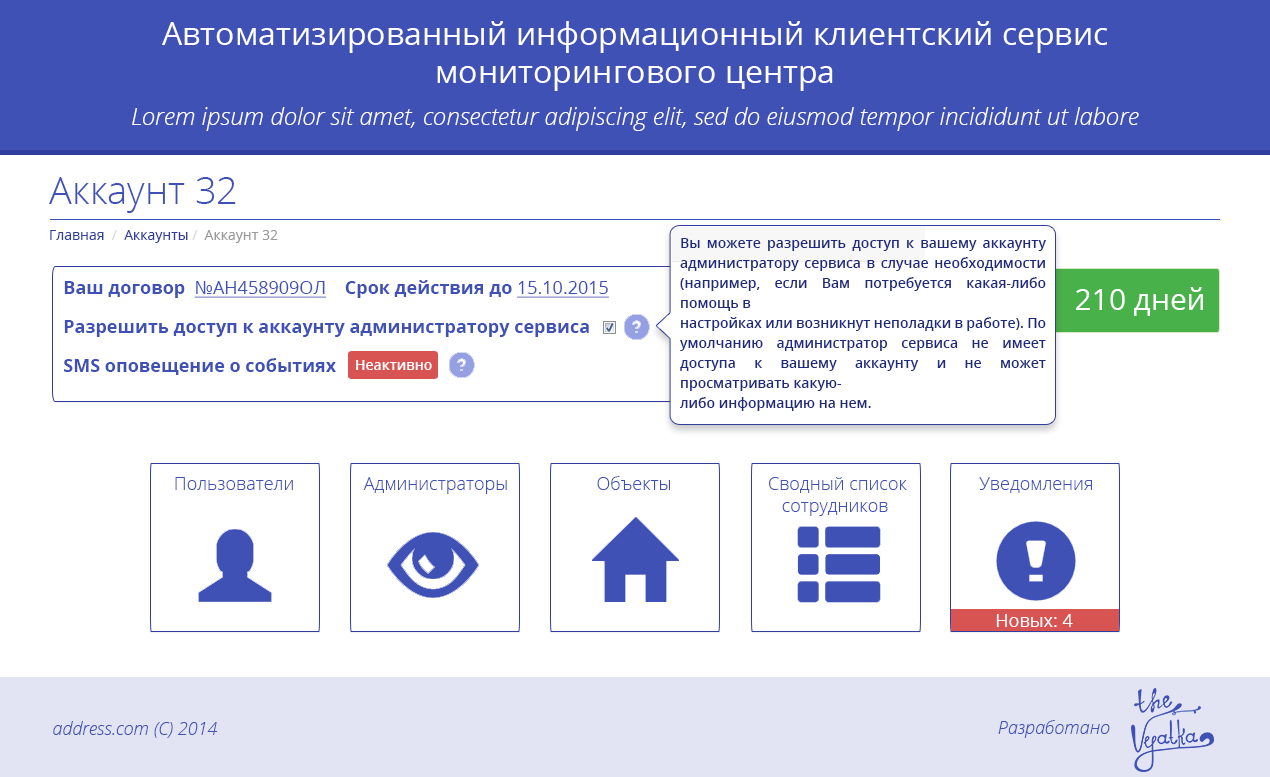
<style>
.page{position:relative;width:1270px;height:777px;background:#ffffff}
.page>*{position:absolute;margin:0}
.t1{font:32px "OpenSans";color:#ffffff}
.t2{font:24px "OpenSansLight-Italic";color:#ffffff}
.t3{font:38px "OpenSans-Light";color:#3f51b5}
.t4{font:14px "OpenSans";color:#999999}
.t5{font:14px "OpenSans";color:#303f9f}
.t6{font:14px "OpenSans";color:#d8d8d8}
.t7{font:14px/20px "OpenSans-Semibold";color:#1d2a7d}
.t8{font:18px "OpenSans-Bold";color:#3f51b5}
.t9{font:18px "OpenSans";color:#3f51b5;text-decoration:underline}
.t10{font:30px "OpenSans";color:#ffffff}
.t11{font:14px "OpenSans-Semibold";color:#ffffff}
.t12{font:18px "OpenSans-Light";color:#3f51b5}
.t13{font:18px "OpenSans";color:#ffffff}
.t14{font:18px "OpenSansLight-Italic";color:#3f51b5}
</style>
<div class="page">
<p class="t1" style="left:162px;top:21px;width:946px;height:70px;text-align:center">Автоматизированный информационный клиентский сервис<br>мониторингового центра</p>
<p class="t2" style="left:132px;top:107px;width:1007px;height:24px">Lorem ipsum dolor sit amet, consectetur adipiscing elit, sed do eiusmod tempor incididunt ut labore</p>
<p class="t3" style="left:49px;top:177px;width:187px;height:36px">Аккаунт 32</p>
<p class="t4" style="left:50px;top:230px;width:228px;height:13px"><span class="t5">Главная  </span><span class="t6">/  </span><span class="t5">Аккаунты </span><span class="t6">/</span>  Аккаунт 32</p>
<p class="t7" style="left:679px;top:238px;width:367px;height:173px;text-align:justify">Вы можете разрешить доступ к вашему аккаунту администратору сервиса в случае необходимости (например, если Вам потребуется какая-либо помощь в<br>настройках или возникнут неполадки в работе). По умолчанию администратор сервиса не имеет доступа к вашему аккаунту и не может просматривать какую-<br>либо информацию на нем.</p>
<p class="t8" style="left:64px;top:280px;width:545px;height:18px">Ваш договор  <span class="t9">№АН458909ОЛ    </span>Срок действия до <span class="t9">15.10.2015</span></p>
<p class="t10" style="left:1076px;top:287px;width:127px;height:29px">210 дней</p>
<p class="t8" style="left:64px;top:320px;width:525px;height:17px">Разрешить доступ к аккаунту администратору сервиса</p>
<p class="t8" style="left:64px;top:358px;width:272px;height:17px">SMS оповещение о событиях</p>
<p class="t11" style="left:356px;top:360px;width:76px;height:10px">Неактивно</p>
<p class="t12" style="left:175px;top:477px;width:118px;height:13px">Пользователи</p>
<p class="t12" style="left:363px;top:477px;width:144px;height:17px">Администраторы</p>
<p class="t12" style="left:597px;top:476px;width:73px;height:14px">Объекты</p>
<p class="t12" style="left:769px;top:477px;width:138px;height:39px;text-align:center">Сводный список сотрудников</p>
<p class="t12" style="left:979px;top:477px;width:113px;height:16px">Уведомления</p>
<p class="t13" style="left:996px;top:614px;width:77px;height:13px">Новых: 4</p>
<p class="t14" style="left:53px;top:721px;width:165px;height:17px">address.com (C) 2014</p>
<p class="t14" style="left:998px;top:720px;width:112px;height:18px">Разработано</p>
</div>
